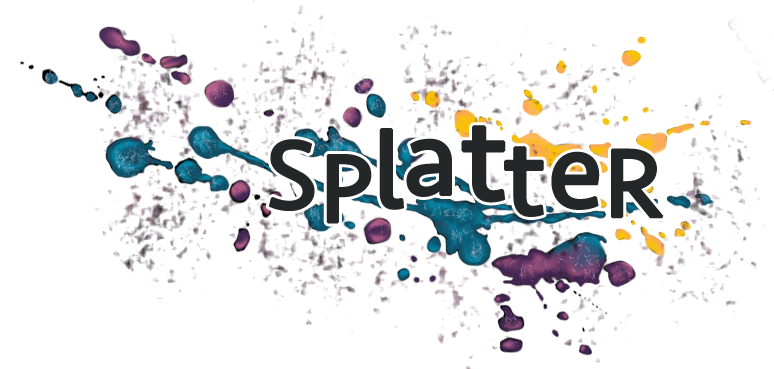
<style>
.page{position:relative;width:774px;height:369px;background:#ffffff}
.page>*{position:absolute;margin:0}
.t1{font:120px "Seravek";color:#242728;font-weight:bold}
.t2{font:110px "Seravek";color:#242728;font-weight:bold}
.t3{font:100px "Seravek";color:#242728;font-weight:bold}
</style>
<div class="page">
<p class="t1" style="left:461px;top:125px;width:45px;height:78px">t</p>
<p class="t2" style="left:379px;top:128px;width:25px;height:82px">l</p>
<p class="t3" style="left:268px;top:139px;width:47px;height:72px">S</p>
<p class="t2" style="left:406px;top:138px;width:46px;height:59px">a</p>
<p class="t2" style="left:504px;top:146px;width:40px;height:71px">t</p>
<p class="t3" style="left:611px;top:148px;width:53px;height:71px">R</p>
<p class="t3" style="left:326px;top:154px;width:46px;height:70px">P</p>
<p class="t2" style="left:551px;top:151px;width:49px;height:59px">e</p>
</div>
